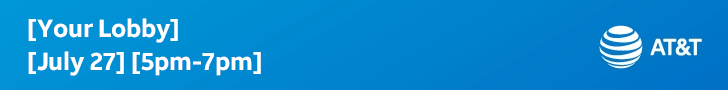
<style>
.page{position:relative;width:728px;height:90px}
.page>*{position:absolute;margin:0}
.t1{font:24.7px/33px "ATTAleckSans_Bold";color:#ffffff}
</style>
<div class="page">
<p class="t1" style="left:28px;top:18px;width:233px;height:58px">[Your Lobby] <br>[July 27] [5pm-7pm]</p>
</div>
